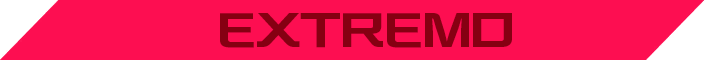
<style>
.page{position:relative;width:706px;height:60px;background:#fd0e51}
.page>*{position:absolute;margin:0}
.t1{font:38.7px "KafuTechnoStd-U";color:#860012;scale:1.21 1}
</style>
<div class="page">
<p class="t1" style="left:220px;top:13px;width:292px;height:35px">EXTREMO</p>
</div>
